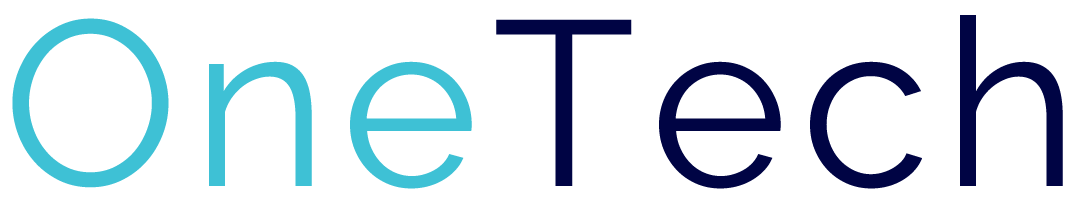
<style>
.page{position:relative;width:1080px;height:210px;background:#ffffff}
.page>*{position:absolute;margin:0}
.t1{font:233.5px "Raleway";letter-spacing:0.06em;color:#000444}
.t2{font:233.5px "Raleway";letter-spacing:0.06em;color:#3ec1d5}
</style>
<div class="page">
<p class="t1" style="left:12px;top:15px;width:1051px;height:174px"><span class="t2">One</span>Tech</p>
</div>
